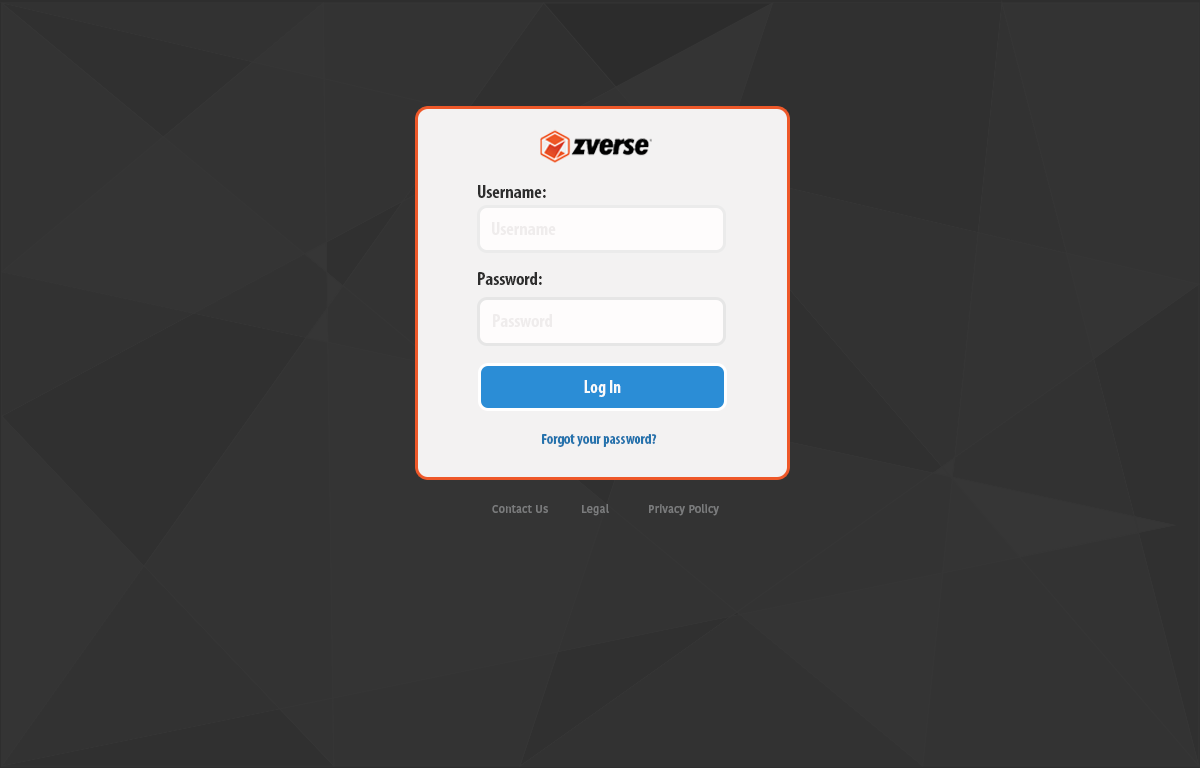
<style>
.page{position:relative;width:1200px;height:768px;background:#333333}
.page>*{position:absolute;margin:0}
.t1{font:18.6px "MyriadPro-BoldCond";color:#2e2e2e}
.t2{font:18.6px "MyriadPro-BoldCond";color:#efecec}
.t3{font:18px "MyriadPro-BoldCond";color:#f9fafa}
.t4{font:14.9px "MyriadPro-BoldCond";color:#2473ad}
.t5{font:11.2px "KohinoorDevanagari-Medium";color:#7a7b7c}
</style>
<div class="page">
<p class="t1" style="left:478px;top:185px;width:68px;height:13px">Username:</p>
<p class="t2" style="left:492px;top:222px;width:64px;height:13px">Username<br>fff</p>
<p class="t1" style="left:478px;top:272px;width:64px;height:13px">Password:</p>
<p class="t2" style="left:493px;top:314px;width:59px;height:13px">Password</p>
<p class="t3" style="left:584px;top:380px;width:37px;height:17px">Log In</p>
<p class="t4" style="left:542px;top:434px;width:115px;height:13px">Forgot your password?</p>
<p class="t5" style="left:492px;top:504px;width:227px;height:12px">Contact Us  Legal   Privacy Policy</p>
</div>
